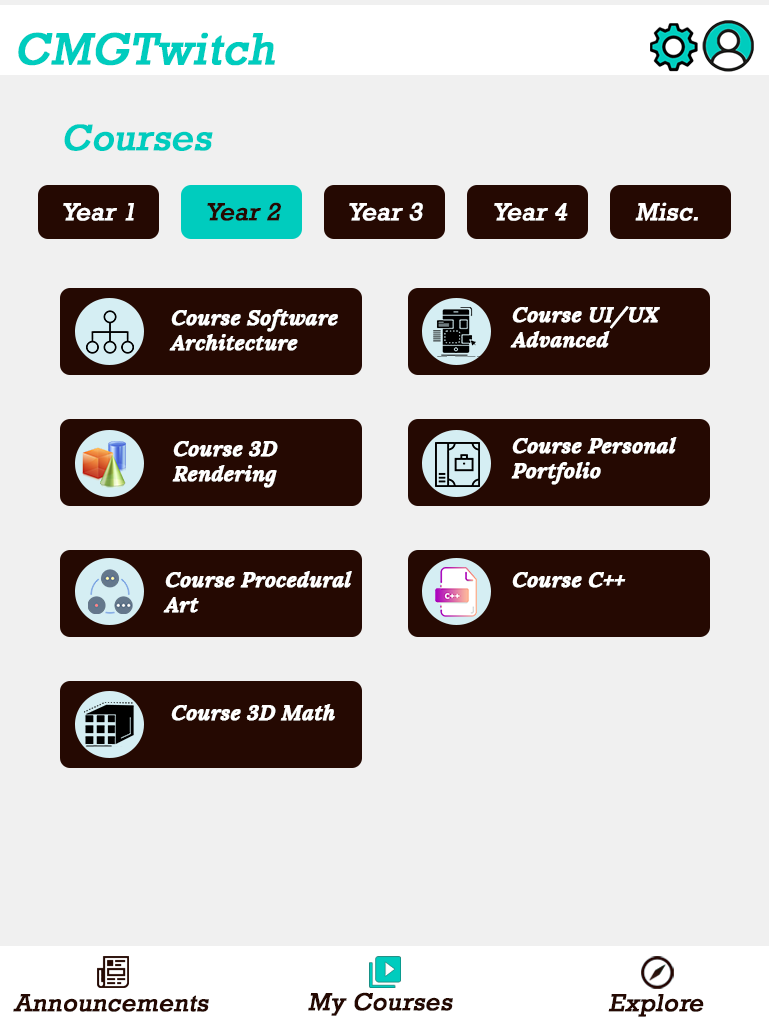
<style>
.page{position:relative;width:769px;height:1024px;background:#f0f0f0}
.page>*{position:absolute;margin:0}
.t1{font:45.4px "Rockwell";color:#00ccbe;font-weight:bold;font-style:italic}
.t2{font:37.5px "Rockwell";color:#00ccbe;font-weight:bold;font-style:italic}
.t3{font:25px "Rockwell";color:#ffffff;font-weight:bold;font-style:italic}
.t4{font:25px "Rockwell";color:#250902;font-weight:bold;font-style:italic}
.t5{font:20.8px "Lora-BoldItalic";color:#ffffff;font-weight:bold;font-style:italic}
</style>
<div class="page">
<p class="t1" style="left:18px;top:32px;width:257px;height:34px">CMGTwitch</p>
<p class="t2" style="left:64px;top:124px;width:149px;height:27px">Courses</p>
<p class="t3" style="left:63px;top:203px;width:71px;height:18px">Year 1</p>
<p class="t4" style="left:207px;top:202px;width:74px;height:19px">Year 2</p>
<p class="t3" style="left:349px;top:202px;width:74px;height:19px">Year 3</p>
<p class="t3" style="left:494px;top:203px;width:74px;height:18px">Year 4</p>
<p class="t3" style="left:635px;top:202px;width:63px;height:19px">Misc.</p>
<p class="t5" style="left:169px;top:309px;width:169px;height:42px">Course Software Architecture</p>
<p class="t5" style="left:510px;top:306px;width:150px;height:42px">Course UI/UX Advanced</p>
<p class="t5" style="left:511px;top:437px;width:166px;height:48px">Course Personal Portfolio</p>
<p class="t5" style="left:172px;top:441px;width:106px;height:47px">Course 3D Rendering</p>
<p class="t5" style="left:163px;top:571px;width:189px;height:42px">Course Procedural Art</p>
<p class="t5" style="left:512px;top:572px;width:114px;height:16px">Course C++</p>
<p class="t5" style="left:171px;top:704px;width:164px;height:17px">Course 3D Math</p>
<p class="t4" style="left:13px;top:994px;width:196px;height:18px">Announcements</p>
<p class="t4" style="left:308px;top:992px;width:145px;height:24px">My Courses</p>
<p class="t4" style="left:608px;top:994px;width:96px;height:23px">Explore</p>
</div>
